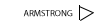
<style>
.page{position:relative;width:101px;height:25px;background:#ffffff}
.page>*{position:absolute;margin:0}
.t1{font:9px "MyriadPro-Regular";color:#080808}
</style>
<div class="page">
<p class="t1" style="left:23px;top:10px;width:50px;height:7px">ARMSTRONG</p>
</div>
